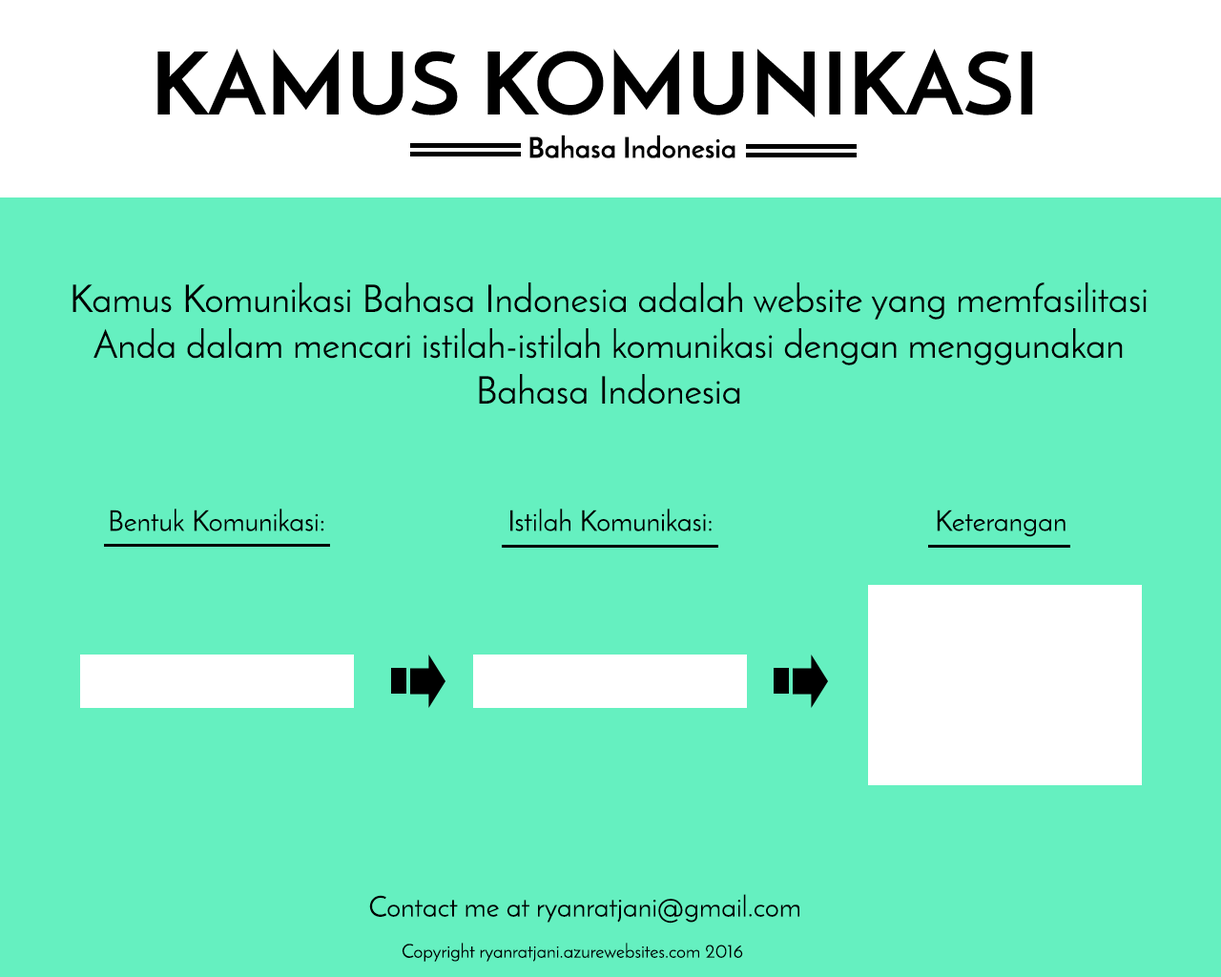
<style>
.page{position:relative;width:1221px;height:977px;background:#65f0c0}
.page>*{position:absolute;margin:0}
.t1{font:85.8px "JosefinSans-Bold";color:#000000;scale:1.03 1}
.t2{font:28.6px "JosefinSans-Bold";color:#000000}
.t3{font:38.2px "JosefinSans";color:#000000}
.t4{font:28.6px "JosefinSans";color:#000000}
.t5{font:19.1px "JosefinSans";color:#000000}
</style>
<div class="page">
<p class="t1" style="left:157px;top:49px;width:876px;height:68px">KAMUS KOMUNIKASI</p>
<p class="t2" style="left:529px;top:134px;width:206px;height:24px">Bahasa Indonesia</p>
<p class="t3" style="left:72px;top:282px;width:1074px;height:122px;text-align:center">Kamus Komunikasi Bahasa Indonesia adalah website yang memfasilitasi<br>Anda dalam mencari istilah-istilah komunikasi dengan menggunakan<br>Bahasa Indonesia</p>
<p class="t4" style="left:110px;top:508px;width:214px;height:23px">Bentuk Komunikasi:</p>
<p class="t4" style="left:510px;top:508px;width:202px;height:23px">Istilah Komunikasi:</p>
<p class="t4" style="left:937px;top:509px;width:128px;height:28px">Keterangan</p>
<p class="t4" style="left:369px;top:894px;width:430px;height:29px">Contact me at ryanratjani@gmail.com</p>
<p class="t5" style="left:402px;top:942px;width:341px;height:19px">Copyright ryanratjani.azurewebsites.com 2016</p>
</div>
